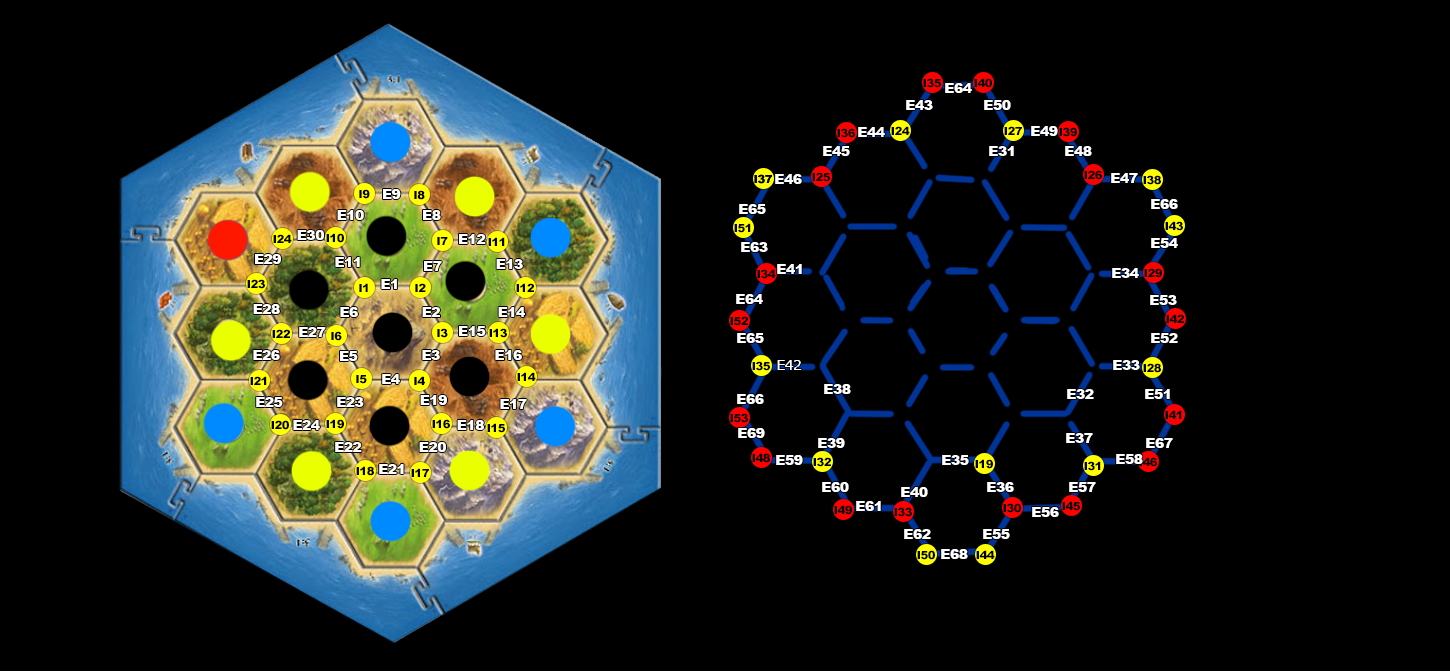
<style>
.page{position:relative;width:1450px;height:672px;background:#000000}
.page>*{position:absolute;margin:0}
.t1{font:11.2px "Arial-Black";letter-spacing:-0.04em;color:#000000}
.t2{font:14px "Arial-Black";letter-spacing:-0.04em;color:#ffffff}
.t3{font:14px "Verdana";letter-spacing:-0.04em;color:#ffffff}
</style>
<div class="page">
<p class="t1" style="left:923px;top:78px;width:18px;height:10px">I35</p>
<p class="t1" style="left:974px;top:78px;width:18px;height:10px">I40</p>
<p class="t2" style="left:945px;top:83px;width:27px;height:10px">E64</p>
<p class="t2" style="left:906px;top:100px;width:27px;height:10px">E43</p>
<p class="t2" style="left:984px;top:100px;width:27px;height:10px">E50</p>
<p class="t1" style="left:891px;top:126px;width:19px;height:9px">I24</p>
<p class="t1" style="left:1004px;top:126px;width:18px;height:9px">I27</p>
<p class="t2" style="left:1031px;top:126px;width:27px;height:10px">E49</p>
<p class="t1" style="left:837px;top:128px;width:18px;height:10px">I36</p>
<p class="t2" style="left:858px;top:127px;width:27px;height:10px">E44</p>
<p class="t1" style="left:1059px;top:127px;width:18px;height:10px">I39</p>
<p class="t2" style="left:823px;top:146px;width:27px;height:10px">E45</p>
<p class="t2" style="left:989px;top:146px;width:25px;height:10px">E31</p>
<p class="t2" style="left:1065px;top:146px;width:27px;height:10px">E48</p>
<p class="t1" style="left:754px;top:174px;width:18px;height:10px">I37</p>
<p class="t1" style="left:754px;top:174px;width:18px;height:10px">I37</p>
<p class="t2" style="left:775px;top:174px;width:27px;height:10px">E46</p>
<p class="t1" style="left:812px;top:172px;width:18px;height:10px">I25</p>
<p class="t1" style="left:1084px;top:170px;width:18px;height:10px">I26</p>
<p class="t2" style="left:1111px;top:173px;width:27px;height:10px">E47</p>
<p class="t1" style="left:1143px;top:175px;width:18px;height:10px">I38</p>
<p class="t1" style="left:359px;top:189px;width:11px;height:10px">I9</p>
<p class="t2" style="left:383px;top:189px;width:18px;height:10px">E9</p>
<p class="t1" style="left:414px;top:190px;width:11px;height:10px">I8</p>
<p class="t2" style="left:739px;top:204px;width:27px;height:10px">E65</p>
<p class="t2" style="left:1151px;top:199px;width:27px;height:10px">E66</p>
<p class="t2" style="left:337px;top:210px;width:27px;height:10px">E10</p>
<p class="t2" style="left:423px;top:210px;width:18px;height:10px">E8</p>
<p class="t1" style="left:1165px;top:221px;width:18px;height:10px">I43</p>
<p class="t2" style="left:297px;top:230px;width:27px;height:10px">E30</p>
<p class="t1" style="left:326px;top:233px;width:18px;height:10px">I10</p>
<p class="t1" style="left:734px;top:223px;width:17px;height:10px">I51</p>
<p class="t1" style="left:273px;top:234px;width:19px;height:9px">I24</p>
<p class="t1" style="left:437px;top:237px;width:11px;height:8px">I7</p>
<p class="t2" style="left:459px;top:234px;width:27px;height:10px">E12</p>
<p class="t1" style="left:488px;top:237px;width:17px;height:9px">I11</p>
<p class="t2" style="left:741px;top:242px;width:27px;height:10px">E63</p>
<p class="t2" style="left:1151px;top:238px;width:27px;height:10px">E54</p>
<p class="t2" style="left:255px;top:254px;width:26px;height:10px">E29</p>
<p class="t2" style="left:335px;top:257px;width:25px;height:10px">E11</p>
<p class="t2" style="left:424px;top:261px;width:18px;height:10px">E7</p>
<p class="t2" style="left:496px;top:259px;width:27px;height:10px">E13</p>
<p class="t1" style="left:757px;top:269px;width:19px;height:10px">I34</p>
<p class="t2" style="left:777px;top:264px;width:25px;height:10px">E41</p>
<p class="t2" style="left:1112px;top:268px;width:27px;height:10px">E34</p>
<p class="t1" style="left:1144px;top:268px;width:18px;height:10px">I29</p>
<p class="t1" style="left:247px;top:279px;width:18px;height:10px">I23</p>
<p class="t2" style="left:381px;top:279px;width:16px;height:10px">E1</p>
<p class="t1" style="left:359px;top:283px;width:9px;height:9px">I1</p>
<p class="t1" style="left:415px;top:283px;width:11px;height:9px">I2</p>
<p class="t1" style="left:516px;top:283px;width:18px;height:9px">I12</p>
<p class="t2" style="left:736px;top:294px;width:27px;height:10px">E64</p>
<p class="t2" style="left:253px;top:304px;width:27px;height:10px">E28</p>
<p class="t2" style="left:1150px;top:295px;width:27px;height:10px">E53</p>
<p class="t2" style="left:340px;top:307px;width:18px;height:10px">E6</p>
<p class="t2" style="left:422px;top:307px;width:18px;height:10px">E2</p>
<p class="t2" style="left:498px;top:307px;width:27px;height:10px">E14</p>
<p class="t1" style="left:730px;top:316px;width:18px;height:10px">I52</p>
<p class="t1" style="left:1166px;top:314px;width:18px;height:9px">I42</p>
<p class="t1" style="left:272px;top:329px;width:18px;height:9px">I22</p>
<p class="t2" style="left:299px;top:327px;width:27px;height:10px">E27</p>
<p class="t1" style="left:437px;top:328px;width:11px;height:10px">I3</p>
<p class="t2" style="left:459px;top:326px;width:27px;height:10px">E15</p>
<p class="t1" style="left:489px;top:328px;width:18px;height:10px">I13</p>
<p class="t1" style="left:331px;top:331px;width:11px;height:10px">I6</p>
<p class="t2" style="left:737px;top:333px;width:27px;height:10px">E65</p>
<p class="t2" style="left:1151px;top:333px;width:27px;height:10px">E52</p>
<p class="t2" style="left:253px;top:350px;width:27px;height:10px">E26</p>
<p class="t2" style="left:340px;top:351px;width:18px;height:10px">E5</p>
<p class="t2" style="left:422px;top:350px;width:18px;height:10px">E3</p>
<p class="t2" style="left:495px;top:350px;width:27px;height:10px">E16</p>
<p class="t1" style="left:752px;top:361px;width:18px;height:10px">I35</p>
<p class="t3" style="left:777px;top:360px;width:25px;height:10px">E42</p>
<p class="t2" style="left:1113px;top:360px;width:27px;height:10px">E33</p>
<p class="t1" style="left:1143px;top:363px;width:18px;height:10px">I28</p>
<p class="t1" style="left:250px;top:376px;width:17px;height:9px">I21</p>
<p class="t1" style="left:356px;top:375px;width:11px;height:9px">I5</p>
<p class="t2" style="left:382px;top:374px;width:18px;height:10px">E4</p>
<p class="t1" style="left:414px;top:376px;width:11px;height:9px">I4</p>
<p class="t1" style="left:517px;top:372px;width:19px;height:9px">I14</p>
<p class="t2" style="left:824px;top:384px;width:27px;height:10px">E38</p>
<p class="t2" style="left:1067px;top:389px;width:27px;height:10px">E32</p>
<p class="t2" style="left:1145px;top:389px;width:25px;height:10px">E51</p>
<p class="t2" style="left:256px;top:397px;width:27px;height:10px">E25</p>
<p class="t2" style="left:337px;top:397px;width:27px;height:10px">E23</p>
<p class="t2" style="left:420px;top:395px;width:27px;height:10px">E19</p>
<p class="t2" style="left:500px;top:399px;width:27px;height:10px">E17</p>
<p class="t2" style="left:737px;top:394px;width:27px;height:10px">E66</p>
<p class="t1" style="left:730px;top:413px;width:18px;height:10px">I53</p>
<p class="t1" style="left:1165px;top:410px;width:17px;height:9px">I41</p>
<p class="t1" style="left:271px;top:420px;width:18px;height:10px">I20</p>
<p class="t2" style="left:293px;top:420px;width:27px;height:10px">E24</p>
<p class="t1" style="left:326px;top:419px;width:18px;height:10px">I19</p>
<p class="t1" style="left:432px;top:419px;width:18px;height:10px">I16</p>
<p class="t2" style="left:457px;top:420px;width:27px;height:10px">E18</p>
<p class="t1" style="left:487px;top:423px;width:18px;height:10px">I15</p>
<p class="t2" style="left:738px;top:428px;width:27px;height:10px">E69</p>
<p class="t2" style="left:818px;top:438px;width:27px;height:10px">E39</p>
<p class="t2" style="left:1066px;top:433px;width:27px;height:10px">E37</p>
<p class="t2" style="left:1146px;top:438px;width:27px;height:10px">E67</p>
<p class="t2" style="left:335px;top:442px;width:27px;height:10px">E22</p>
<p class="t2" style="left:419px;top:442px;width:27px;height:10px">E20</p>
<p class="t1" style="left:752px;top:453px;width:18px;height:10px">I48</p>
<p class="t2" style="left:776px;top:455px;width:27px;height:10px">E59</p>
<p class="t1" style="left:813px;top:457px;width:18px;height:10px">I32</p>
<p class="t2" style="left:942px;top:455px;width:27px;height:10px">E35</p>
<p class="t1" style="left:975px;top:459px;width:18px;height:10px">I19</p>
<p class="t1" style="left:1084px;top:461px;width:17px;height:10px">I31</p>
<p class="t2" style="left:1116px;top:454px;width:27px;height:10px">E58</p>
<p class="t1" style="left:1139px;top:457px;width:18px;height:10px">I46</p>
<p class="t1" style="left:356px;top:466px;width:18px;height:10px">I18</p>
<p class="t2" style="left:379px;top:464px;width:25px;height:10px">E21</p>
<p class="t1" style="left:411px;top:468px;width:18px;height:9px">I17</p>
<p class="t2" style="left:822px;top:482px;width:27px;height:10px">E60</p>
<p class="t2" style="left:987px;top:482px;width:27px;height:10px">E36</p>
<p class="t2" style="left:1069px;top:482px;width:27px;height:10px">E57</p>
<p class="t2" style="left:901px;top:487px;width:27px;height:10px">E40</p>
<p class="t1" style="left:834px;top:505px;width:18px;height:10px">I49</p>
<p class="t2" style="left:856px;top:501px;width:25px;height:10px">E61</p>
<p class="t1" style="left:894px;top:507px;width:18px;height:10px">I33</p>
<p class="t1" style="left:1003px;top:503px;width:18px;height:10px">I30</p>
<p class="t2" style="left:1032px;top:507px;width:27px;height:10px">E56</p>
<p class="t1" style="left:1062px;top:501px;width:18px;height:10px">I45</p>
<p class="t2" style="left:904px;top:529px;width:27px;height:10px">E62</p>
<p class="t2" style="left:983px;top:529px;width:27px;height:10px">E55</p>
<p class="t1" style="left:917px;top:550px;width:18px;height:10px">I50</p>
<p class="t2" style="left:941px;top:549px;width:27px;height:10px">E68</p>
<p class="t1" style="left:976px;top:550px;width:19px;height:9px">I44</p>
</div>
